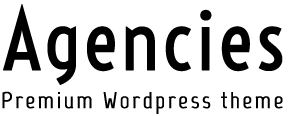
<style>
.page{position:relative;width:303px;height:116px;background:#ffffff}
.page>*{position:absolute;margin:0}
.t1{font:82px "Voltaire";color:#000000;font-weight:bold}
.t2{font:23px "Marvel-Regular";letter-spacing:0.1em;color:#000000;font-weight:bold}
</style>
<div class="page">
<p class="t1" style="left:3px;top:4px;width:280px;height:81px">Agencies</p>
<p class="t2" style="left:2px;top:91px;width:281px;height:23px">Premium Wordpress theme</p>
</div>
